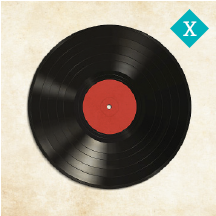
<style>
.page{position:relative;width:216px;height:216px}
.page>*{position:absolute;margin:0}
.t1{font:19.7px "Copse";color:#ffffff;text-transform:uppercase}
</style>
<div class="page">
<p class="t1" style="left:183px;top:21px;width:14px;height:15px">X</p>
</div>
